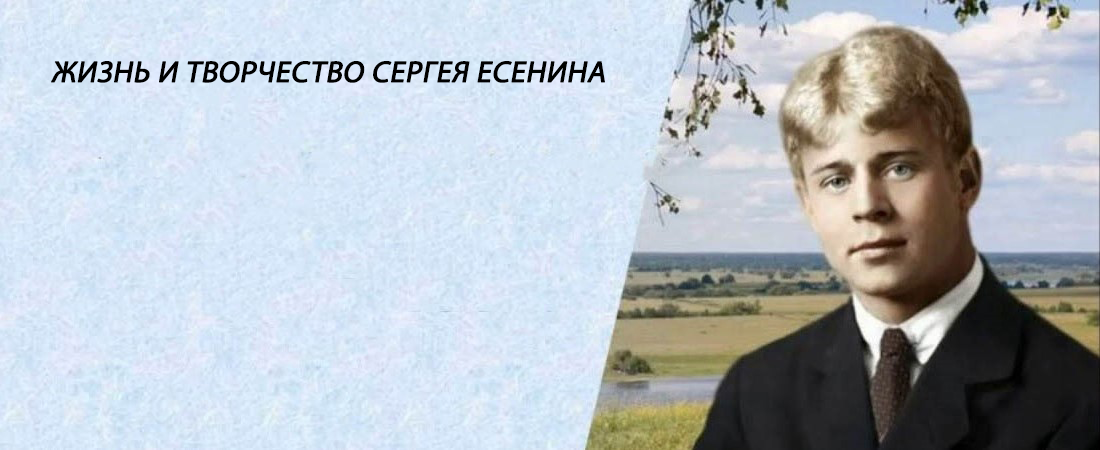
<style>
.page{position:relative;width:1100px;height:450px}
.page>*{position:absolute;margin:0}
.t1{font:30px "MyriadPro-Regular";color:#000000;text-transform:uppercase;font-weight:bold;font-style:italic}
</style>
<div class="page">
<p class="t1" style="left:51px;top:61px;width:554px;height:22px">Жизнь и творчество Сергея Есенина</p>
</div>
